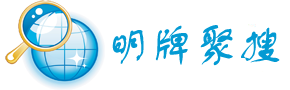
<style>
.page{position:relative;width:290px;height:90px;background:#ffffff}
.page>*{position:absolute;margin:0}
.t1{font:44.4px "FZSTK--GBK1-0";color:#039ad3}
</style>
<div class="page">
<p class="t1" style="left:112px;top:25px;width:168px;height:41px">明牌聚搜</p>
</div>
